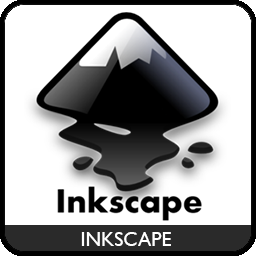
<style>
.page{position:relative;width:256px;height:256px;background:#ffffff}
.page>*{position:absolute;margin:0}
.t1{font:20px "GillSansMT";color:#ffffff}
</style>
<div class="page">
<p class="t1" style="left:81px;top:232px;width:90px;height:14px">INKSCAPE</p>
</div>
